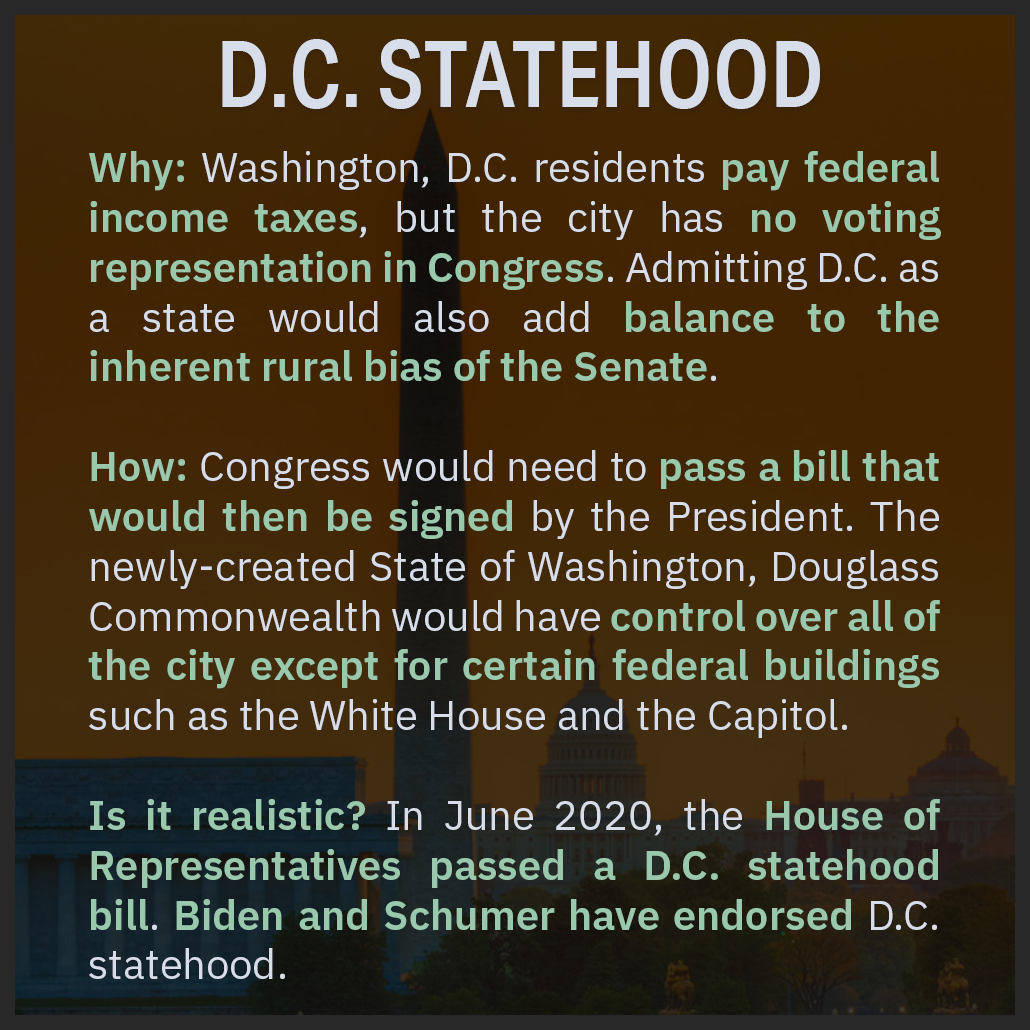
<style>
.page{position:relative;width:1030px;height:1030px}
.page>*{position:absolute;margin:0}
.t1{font:92.1px "AktivGroteskCd-Medium";color:#d8dee9}
.t2{font:41.5px "IBMPlexSans";color:#d8dee9}
.t3{font:41.5px "IBMPlexSans-SemiBold";color:#9ac8ad}
</style>
<div class="page">
<p class="t1" style="left:222px;top:39px;width:598px;height:70px">D.C. STATEHOOD</p>
<p class="t2" style="left:88px;top:151px;width:853px;height:828px;text-align:justify"><span class="t3">Why:</span> Washington, D.C. residents <span class="t3">pay federal income taxes</span>, but the city has <span class="t3">no voting representation in Congress</span>. Admitting D.C. as a state would also add <span class="t3">balance to the inherent rural bias of the Senate</span>.<br><br><span class="t3">How:</span> Congress would need to <span class="t3">pass a bill that would then be signed</span> by the President. The  newly-created State of Washington, Douglass Commonwealth would have <span class="t3">control over all of the city except for certain federal buildings</span> such as the White House and the Capitol.<br><br><span class="t3">Is it realistic?</span> In June 2020, the <span class="t3">House of Representatives passed a D.C. statehood bill</span>. <span class="t3">Biden and Schumer have endorsed</span> D.C. statehood.</p>
</div>
